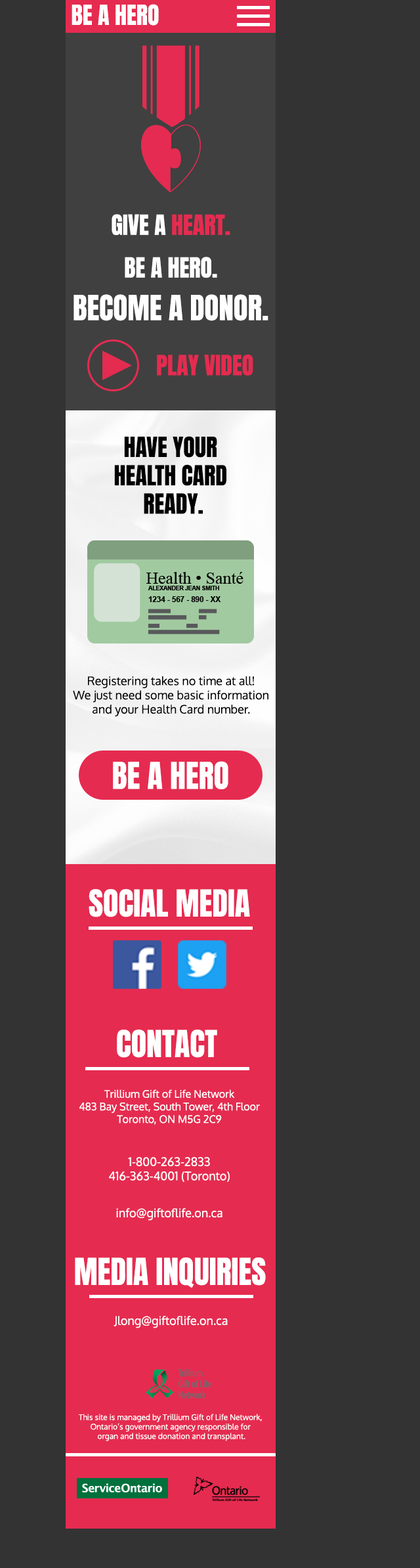
<style>
.page{position:relative;width:420px;height:1568px;background:#333333}
.page>*{position:absolute;margin:0}
.t1{font:23.6px "Anton-Regular";color:#ffffff}
.t2{font:29.5px/42.7px "Anton-Regular";color:#ffffff}
.t3{font:23.6px/42.7px "Anton-Regular";color:#ffffff}
.t4{font:23.6px/42.7px "Anton-Regular";color:#e52b50}
.t5{font:23.6px "Anton-Regular";color:#e52b50}
.t6{font:23.6px "Anton-Regular";color:#000000}
.t7{font:11.8px "Oxygen-Regular";color:#000000}
.t8{font:31.5px "Anton-Regular";color:#ffffff}
.t9{font:10.5px "Oxygen-Regular";color:#ffffff}
.t10{font:11.8px "Oxygen-Regular";color:#ffffff}
.t11{font:7.9px "Oxygen-Regular";color:#ffffff}
</style>
<div class="page">
<p class="t1" style="left:72px;top:4px;width:87px;height:22px">BE A HERO</p>
<p class="t2" style="left:74px;top:214px;width:195px;height:107px;text-align:center"><span class="t3">GIVE A </span><span class="t4">HEART.<br></span><span class="t3">BE A HERO.<br></span>BECOME A DONOR.</p>
<p class="t5" style="left:157px;top:355px;width:96px;height:21px">PLAY VIDEO</p>
<p class="t6" style="left:114px;top:436px;width:113px;height:78px;text-align:center">HAVE YOUR <br>HEALTH CARD <br>READY.</p>
<p class="t7" style="left:73px;top:676px;width:196px;height:41px;text-align:center">Registering takes no time at all!<br>We just need some basic information<br>and your Health Card number.</p>
<p class="t8" style="left:113px;top:761px;width:116px;height:28px">BE A HERO</p>
<p class="t8" style="left:89px;top:889px;width:161px;height:28px">SOCIAL MEDIA</p>
<p class="t8" style="left:117px;top:1030px;width:100px;height:28px">CONTACT</p>
<p class="t9" style="left:79px;top:1089px;width:181px;height:36px;text-align:center">Trillium Gift of Life Network<br>483 Bay Street, South Tower, 4th Floor<br>Toronto, ON M5G 2C9</p>
<p class="t10" style="left:109px;top:1157px;width:121px;height:25px;text-align:center">1-800-263-2833<br>416-363-4001 (Toronto)</p>
<p class="t10" style="left:116px;top:1208px;width:107px;height:13px">info@giftoflife.on.ca</p>
<p class="t8" style="left:75px;top:1257px;width:191px;height:31px">MEDIA INQUIRIES</p>
<p class="t10" style="left:114px;top:1316px;width:114px;height:12px">Jlong@giftoflife.on.ca</p>
<p class="t11" style="left:79px;top:1414px;width:183px;height:27px;text-align:center">This site is managed by Trillium Gift of Life Network, <br>Ontario’s government agency responsible for <br>organ and tissue donation and transplant.</p>
</div>
